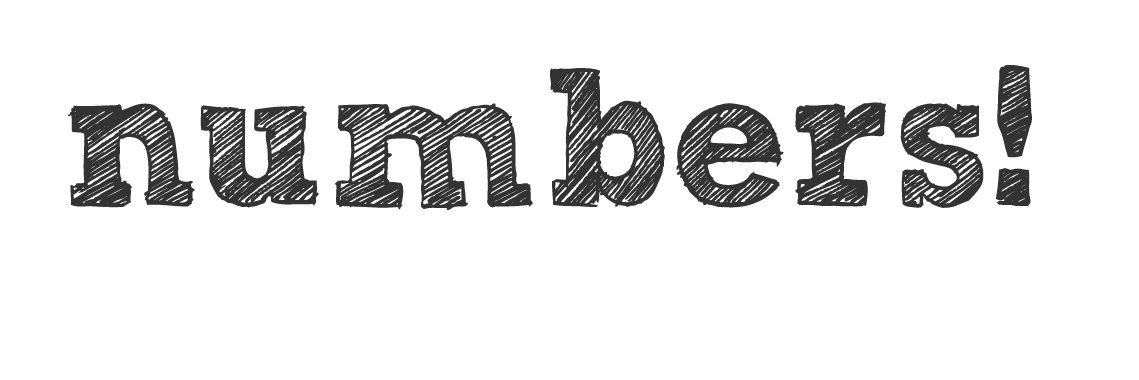
<style>
.page{position:relative;width:1139px;height:380px;background:#ffffff}
.page>*{position:absolute;margin:0}
.t1{font:200px "SketchRockwell";color:#333333}
</style>
<div class="page">
<p class="t1" style="left:67px;top:65px;width:965px;height:145px">numbers!</p>
</div>
